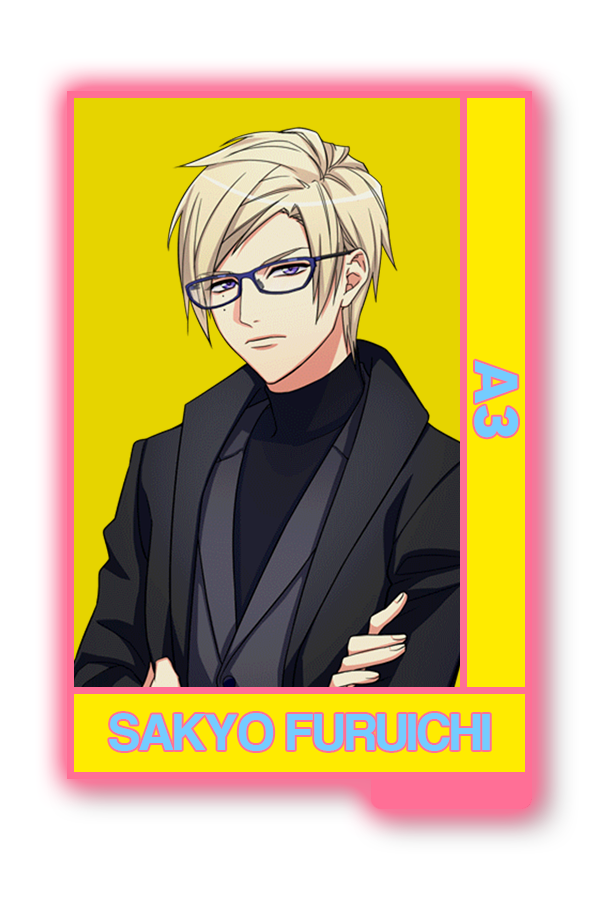
<style>
.page{position:relative;width:600px;height:900px;background:#ffffff}
.page>*{position:absolute;margin:0}
.t1{font:60.5px "MADETOMMY-Bold";color:#74ccff}
.t2{font:53.5px "CoolveticaRg-Regular";color:#74ccff}
</style>
<div class="page">
<p class="t1" style="left:474px;top:360px;width:44px;height:78px;rotate:90deg">A3</p>
<p class="t2" style="left:109px;top:713px;width:381px;height:38px">SAKYO FURUICHI</p>
</div>
